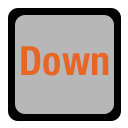
<style>
.page{position:relative;width:128px;height:128px;background:#b7b7b7}
.page>*{position:absolute;margin:0}
.t1{font:40.3px "HelveticaNeue-CondensedBold";color:#e76626}
</style>
<div class="page">
<p class="t1" style="left:21px;top:46px;width:88px;height:30px">Down</p>
</div>
